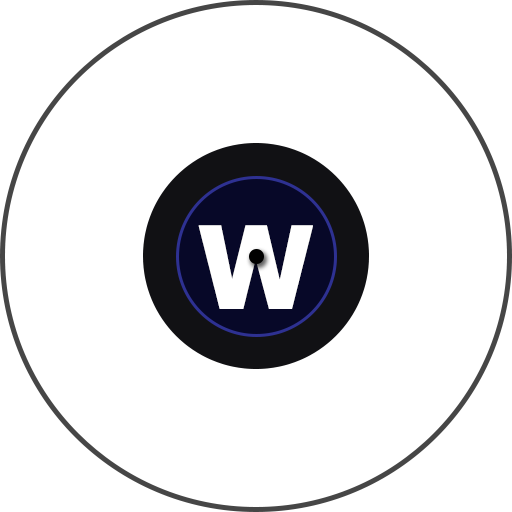
<style>
.page{position:relative;width:512px;height:512px;background:#ffffff}
.page>*{position:absolute;margin:0}
.t1{font:113.8px "Tahoma-Bold";color:#ffffff;font-weight:bold}
</style>
<div class="page">
<p class="t1" style="left:198px;top:225px;width:115px;height:84px">W</p>
</div>
